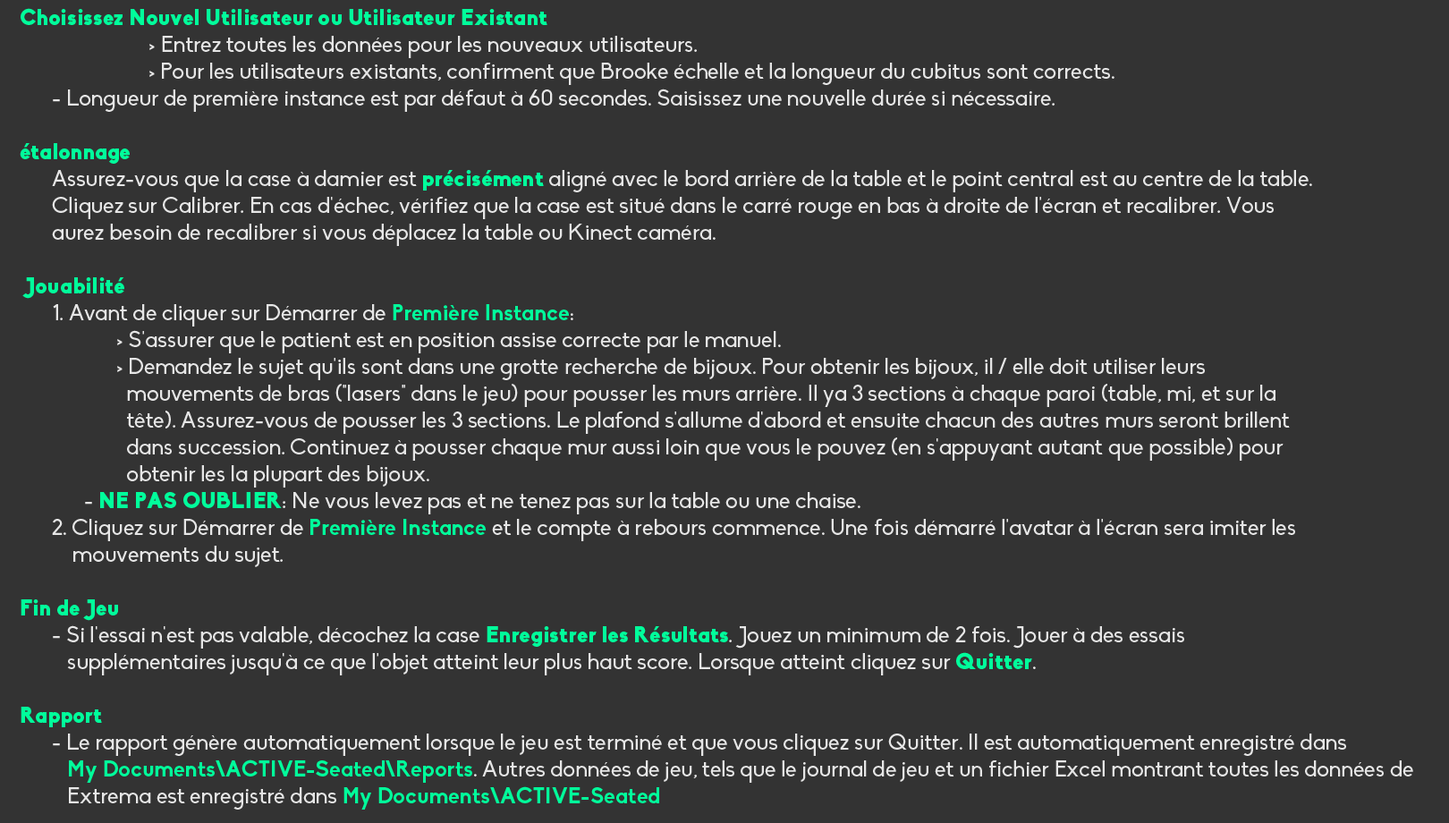
<style>
.page{position:relative;width:1449px;height:823px;background:#333333}
.page>*{position:absolute;margin:0}
.t1{font:22.4px "Biko";color:#e6e6e6}
.t2{font:22.4px "Biko-Black";color:#00fe9b}
.t3{font:22.4px "Biko-Bold";color:#00fe9b}
</style>
<div class="page">
<p class="t1" style="left:20px;top:8px;width:1393px;height:801px"><span class="t2">Choisissez Nouvel Utilisateur ou Utilisateur Existant <br></span>    &gt; Entrez toutes les données pour les nouveaux utilisateurs. <br>    &gt; Pour les utilisateurs existants, confirment que Brooke échelle et la longueur du cubitus sont corrects. <br> - Longueur de première instance est par défaut à 60 secondes. Saisissez une nouvelle durée si nécessaire. <br><br><span class="t2">étalonnage <br></span> Assurez-vous que la case à damier est <span class="t2">précisément </span>aligné avec le bord arrière de la table et le point central est au centre de la table. <br> Cliquez sur Calibrer. En cas d'échec, vérifiez que la case est situé dans le carré rouge en bas à droite de l'écran et recalibrer. Vous <br> aurez besoin de recalibrer si vous déplacez la table ou Kinect caméra.<br><br><span class="t2"> Jouabilité <br></span> 1. Avant de cliquer sur Démarrer de <span class="t3">Première Instance</span>:   <br>   &gt; S'assurer que le patient est en position assise correcte par le manuel. <br>   &gt; Demandez le sujet qu'ils sont dans une grotte recherche de bijoux. Pour obtenir les bijoux, il / elle doit utiliser leurs<br>     mouvements de bras ("lasers" dans le jeu) pour pousser les murs arrière. Il ya 3 sections à chaque paroi (table, mi, et sur la<br>     tête). Assurez-vous de pousser les 3 sections. Le plafond s'allume d'abord et ensuite chacun des autres murs seront brillent<br>     dans succession. Continuez à pousser chaque mur aussi loin que vous le pouvez (en s'appuyant autant que possible) pour <br>     obtenir les la plupart des bijoux. <br>  - <span class="t2">NE PAS OUBLIER</span>: Ne vous levez pas et ne tenez pas sur la table ou une chaise. <br> 2. Cliquez sur Démarrer de <span class="t3">Première Instance</span> et le compte à rebours commence. Une fois démarré l'avatar à l'écran sera imiter les  <br>     mouvements du sujet. <br><br><span class="t2">Fin de Jeu <br></span> - Si l'essai n'est pas valable, décochez la case <span class="t2">Enregistrer les Résultats</span>. Jouez un minimum de 2 fois. Jouer à des essais <br>    supplémentaires jusqu'à ce que l'objet atteint leur plus haut score. Lorsque atteint cliquez sur <span class="t2">Quitter</span>. <br><br><span class="t2">Rapport<br></span> - Le rapport génère automatiquement lorsque le jeu est terminé et que vous cliquez sur Quitter. Il est automatiquement enregistré dans <br>    <span class="t3">My Documents\ACTIVE-Seated\Reports</span>. Autres données de jeu, tels que le journal de jeu et un fichier Excel montrant toutes les données de <br>    Extrema est enregistré dans <span class="t3">My Documents\ACTIVE-Seated</span></p>
</div>
